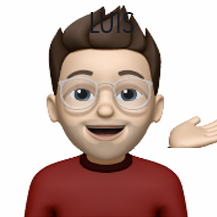
<style>
.page{position:relative;width:217px;height:217px;background:#fefefe}
.page>*{position:absolute;margin:0}
.t1{font:30px "AvenirNextCondensed-Regular";color:#141a26}
</style>
<div class="page">
<p class="t1" style="left:90px;top:12px;width:44px;height:21px">LUIS</p>
</div>
